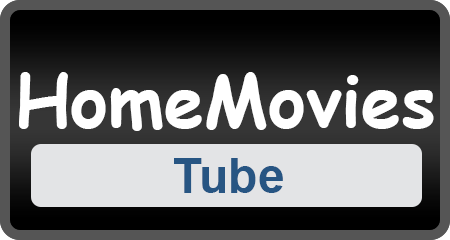
<style>
.page{position:relative;width:450px;height:240px;background:#e3e4e6}
.page>*{position:absolute;margin:0}
.t1{font:72px "ComicSansMS-Bold";color:#ffffff}
.t2{font:48px "Arial-BoldMT";color:#275583}
</style>
<div class="page">
<p class="t1" style="left:19px;top:72px;width:415px;height:59px">HomeMovies</p>
<p class="t2" style="left:174px;top:158px;width:109px;height:35px">Tube</p>
</div>
